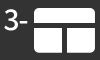
<style>
.page{position:relative;width:100px;height:60px;background:#333333}
.page>*{position:absolute;margin:0}
.t1{font:28px "NotoSansCJKkr-Medium";letter-spacing:-0.03em;color:#ffffff;text-transform:uppercase}
</style>
<div class="page">
<p class="t1" style="left:4px;top:9px;width:24px;height:22px">3-</p>
</div>
